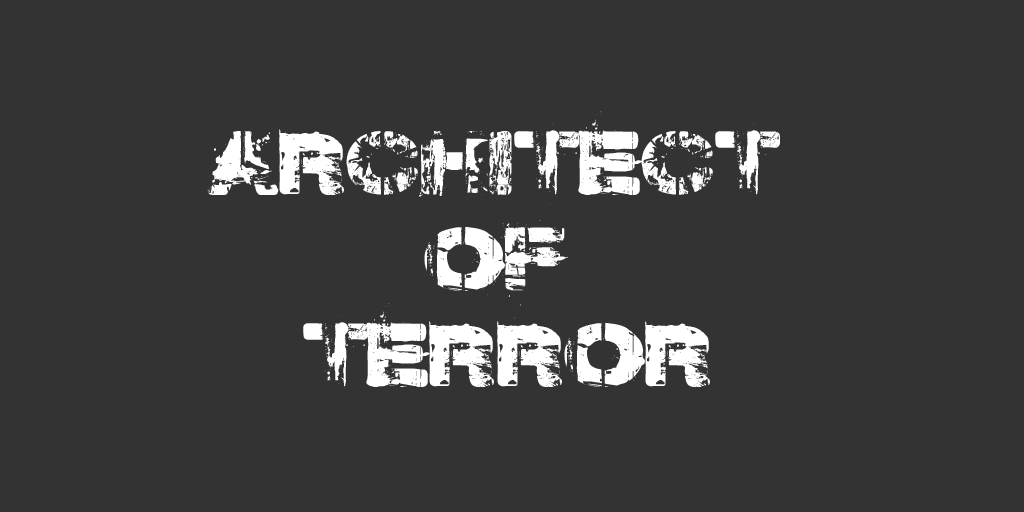
<style>
.page{position:relative;width:1024px;height:512px;background:#333333}
.page>*{position:absolute;margin:0}
.t1{font:80px "WeekendWarrior";color:#ffffff}
</style>
<div class="page">
<p class="t1" style="left:207px;top:111px;width:573px;height:276px;text-align:center">Architect <br>of <br>Terror</p>
</div>
